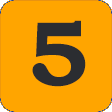
<style>
.page{position:relative;width:112px;height:112px;background:#ffa500}
.page>*{position:absolute;margin:0}
.t1{font:91.7px "BookmanOldStyle-Bold";color:#2b2d31}
</style>
<div class="page">
<p class="t1" style="left:32px;top:20px;width:54px;height:67px">5</p>
</div>
